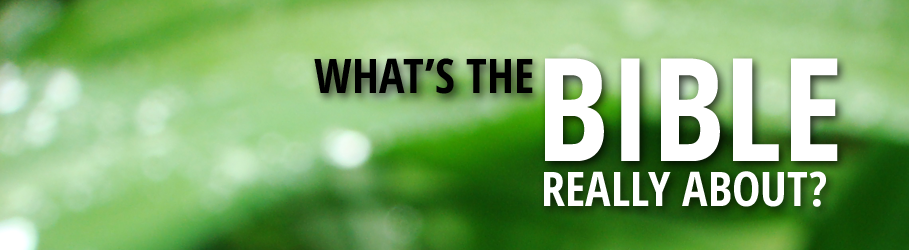
<style>
.page{position:relative;width:909px;height:250px}
.page>*{position:absolute;margin:0}
.t1{font:47.8px "OpenSans-CondensedBold";color:#000000}
.t2{font:143.5px "OpenSans-CondensedBold";color:#ffffff}
.t3{font:47.8px "OpenSans-CondensedBold";color:#ffffff}
</style>
<div class="page">
<p class="t1" style="left:314px;top:58px;width:219px;height:36px">WHAT’S THE</p>
<p class="t2" style="left:545px;top:58px;width:293px;height:103px">BIBLE</p>
<p class="t3" style="left:544px;top:171px;width:282px;height:36px">REALLY ABOUT?</p>
</div>
